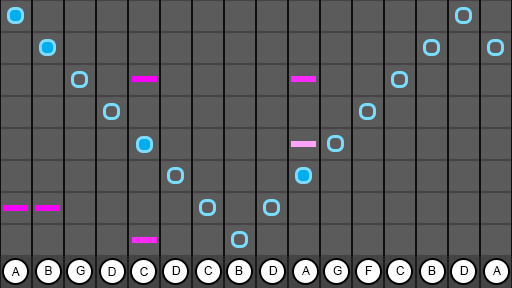
<style>
.page{position:relative;width:512px;height:288px;background:#5b5b5b}
.page>*{position:absolute;margin:0}
.t1{font:12px "ArialMT";color:#000000}
</style>
<div class="page">
<p class="t1" style="left:11px;top:267px;width:9px;height:9px">A</p>
<p class="t1" style="left:45px;top:266px;width:7px;height:9px">B</p>
<p class="t1" style="left:76px;top:266px;width:9px;height:9px">G</p>
<p class="t1" style="left:108px;top:267px;width:8px;height:9px">D</p>
<p class="t1" style="left:140px;top:267px;width:8px;height:9px">C</p>
<p class="t1" style="left:172px;top:266px;width:9px;height:9px">D</p>
<p class="t1" style="left:204px;top:266px;width:9px;height:9px">C</p>
<p class="t1" style="left:235px;top:266px;width:8px;height:9px">B</p>
<p class="t1" style="left:269px;top:266px;width:9px;height:9px">D</p>
<p class="t1" style="left:302px;top:266px;width:8px;height:9px">A</p>
<p class="t1" style="left:333px;top:266px;width:9px;height:9px">G</p>
<p class="t1" style="left:365px;top:266px;width:7px;height:9px">F</p>
<p class="t1" style="left:396px;top:266px;width:9px;height:9px">C</p>
<p class="t1" style="left:428px;top:266px;width:8px;height:9px">B</p>
<p class="t1" style="left:460px;top:266px;width:9px;height:9px">D</p>
<p class="t1" style="left:493px;top:266px;width:8px;height:9px">A</p>
</div>
